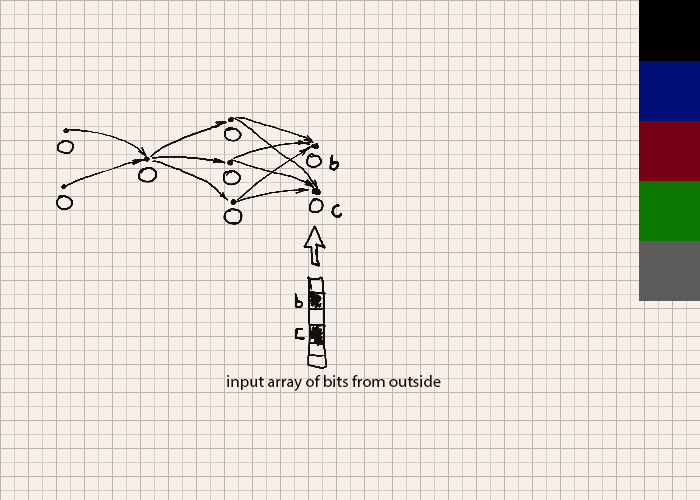
<style>
.page{position:relative;width:700px;height:500px;background:#f7f0ea}
.page>*{position:absolute;margin:0}
.t1{font:16.7px "MyriadPro-Regular";color:#0d0d0d}
</style>
<div class="page">
<p class="t1" style="left:227px;top:375px;width:214px;height:16px">input array of bits from outside</p>
</div>
